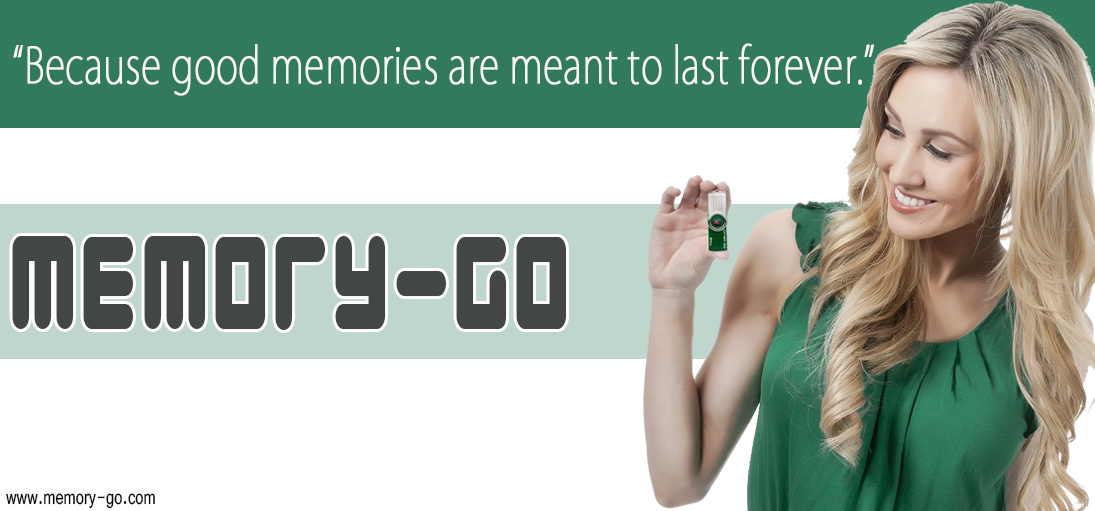
<style>
.page{position:relative;width:1095px;height:511px;background:#ffffff}
.page>*{position:absolute;margin:0}
.t1{font:48.8px "KozGoPr6N-ExtraLight";color:#f8f8f3;font-weight:bold;scale:0.74 1}
.t2{font:168.2px "YoungTechs";color:#424744;scale:0.65 1}
.t3{font:21.8px "Vrinda";color:#070707;scale:0.75 1}
</style>
<div class="page">
<p class="t1" style="left:13px;top:43px;width:861px;height:53px">“Because good memories are meant to last forever.”</p>
<p class="t2" style="left:12px;top:236px;width:554px;height:94px">memory-go</p>
<p class="t3" style="left:6px;top:493px;width:149px;height:16px">www.memory-go.com</p>
</div>
